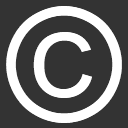
<style>
.page{position:relative;width:128px;height:128px;background:#333333}
.page>*{position:absolute;margin:0}
.t1{font:156.7px "ArialMT";color:#ffffff}
</style>
<div class="page">
<p class="t1" style="left:6px;top:6px;width:116px;height:117px">©</p>
</div>
